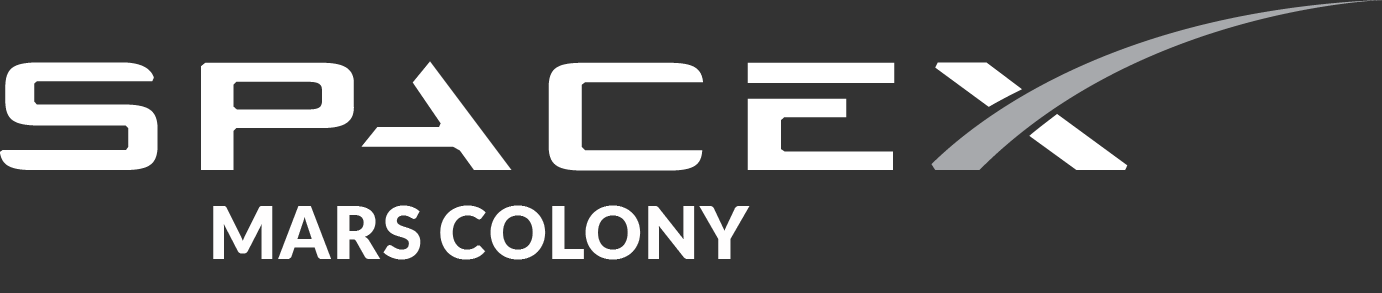
<style>
.page{position:relative;width:1382px;height:293px;background:#333333}
.page>*{position:absolute;margin:0}
.t1{font:72px "Lato-Black";letter-spacing:0.025em;color:#fffefe}
</style>
<div class="page">
<p class="t1" style="left:213px;top:205px;width:537px;height:55px">MARS COLONY</p>
</div>
